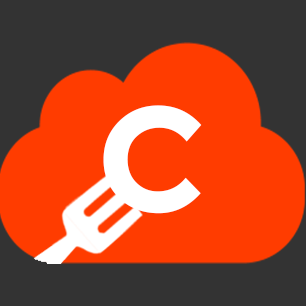
<style>
.page{position:relative;width:306px;height:306px;background:#ff3c00}
.page>*{position:absolute;margin:0}
.t1{font:149px "Montserrat-Bold";letter-spacing:0.05em;color:#ffffff}
</style>
<div class="page">
<p class="t1" style="left:103px;top:105px;width:99px;height:109px">C</p>
</div>
